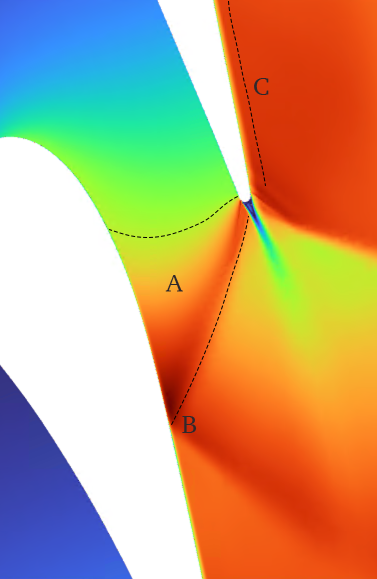
<style>
.page{position:relative;width:377px;height:579px;background:#ffffff}
.page>*{position:absolute;margin:0}
.t1{font:26px "Charter-Roman";letter-spacing:-0.02em;color:#2f292b}
</style>
<div class="page">
<p class="t1" style="left:254px;top:78px;width:15px;height:17px">C</p>
<p class="t1" style="left:165px;top:275px;width:18px;height:17px">A</p>
<p class="t1" style="left:182px;top:416px;width:15px;height:17px">B</p>
</div>
